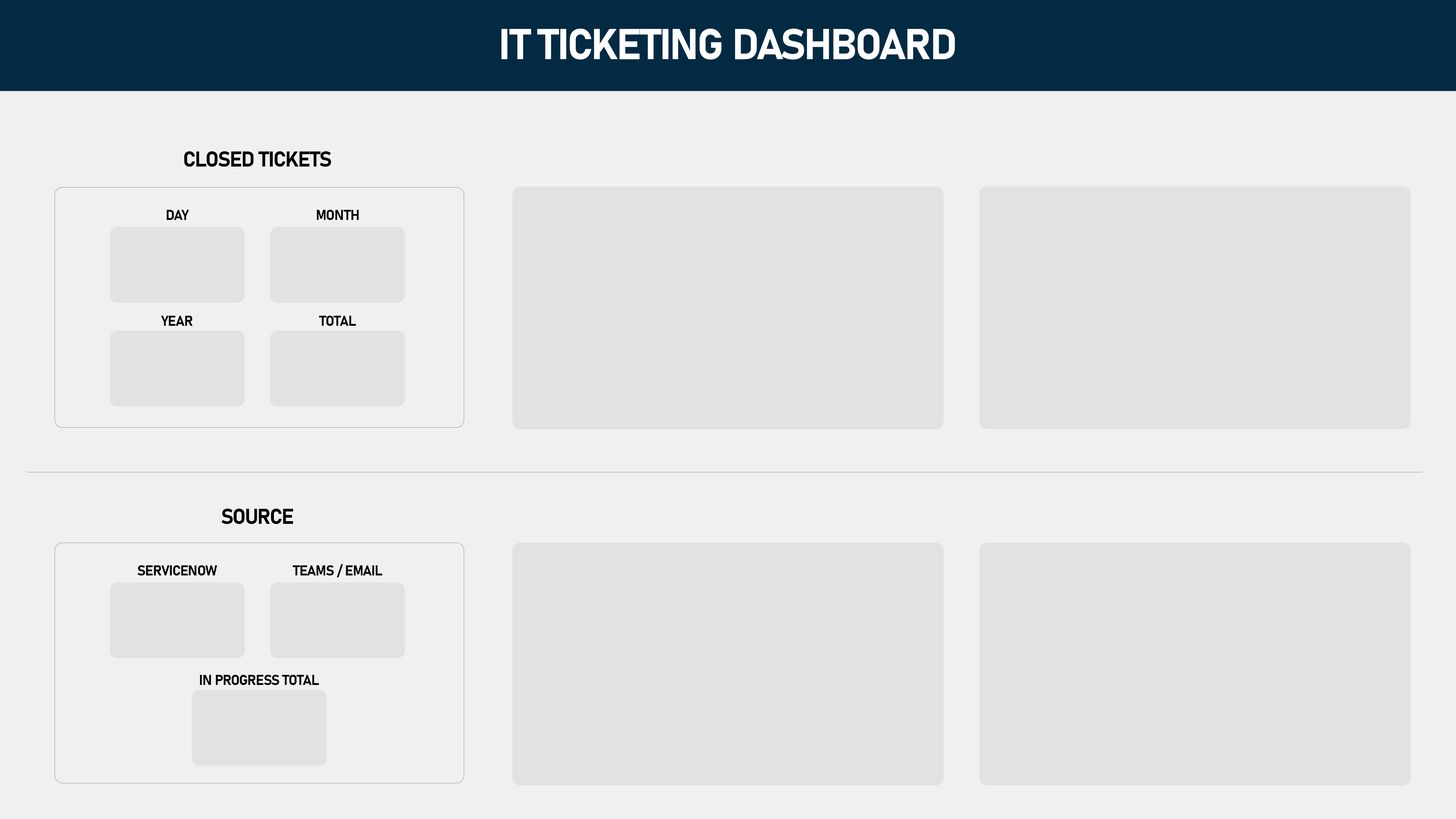
<style>
.page{position:relative;width:1456px;height:819px;background:#f0f0f0}
.page>*{position:absolute;margin:0}
.t1{font:42.5px "Bahnschrift-Bold";letter-spacing:-0.04em;color:#ffffff;text-transform:uppercase}
.t2{font:21.2px "Bahnschrift-Bold";letter-spacing:-0.04em;color:#000000;text-transform:uppercase}
.t3{font:14.2px "Bahnschrift-Bold";letter-spacing:-0.04em;color:#000000;text-transform:uppercase}
</style>
<div class="page">
<p class="t1" style="left:501px;top:29px;width:454px;height:31px">IT Ticketing Dashboard</p>
<p class="t2" style="left:184px;top:151px;width:147px;height:16px">Closed Tickets</p>
<p class="t3" style="left:167px;top:210px;width:22px;height:10px">Day</p>
<p class="t3" style="left:317px;top:210px;width:42px;height:10px">month</p>
<p class="t3" style="left:161px;top:315px;width:32px;height:11px">year</p>
<p class="t3" style="left:319px;top:315px;width:37px;height:11px">total</p>
<p class="t2" style="left:221px;top:508px;width:72px;height:16px">Source</p>
<p class="t3" style="left:137px;top:565px;width:80px;height:11px">ServiceNow</p>
<p class="t3" style="left:293px;top:564px;width:89px;height:14px">teams / email</p>
<p class="t3" style="left:200px;top:675px;width:119px;height:10px">In progress Total</p>
</div>
